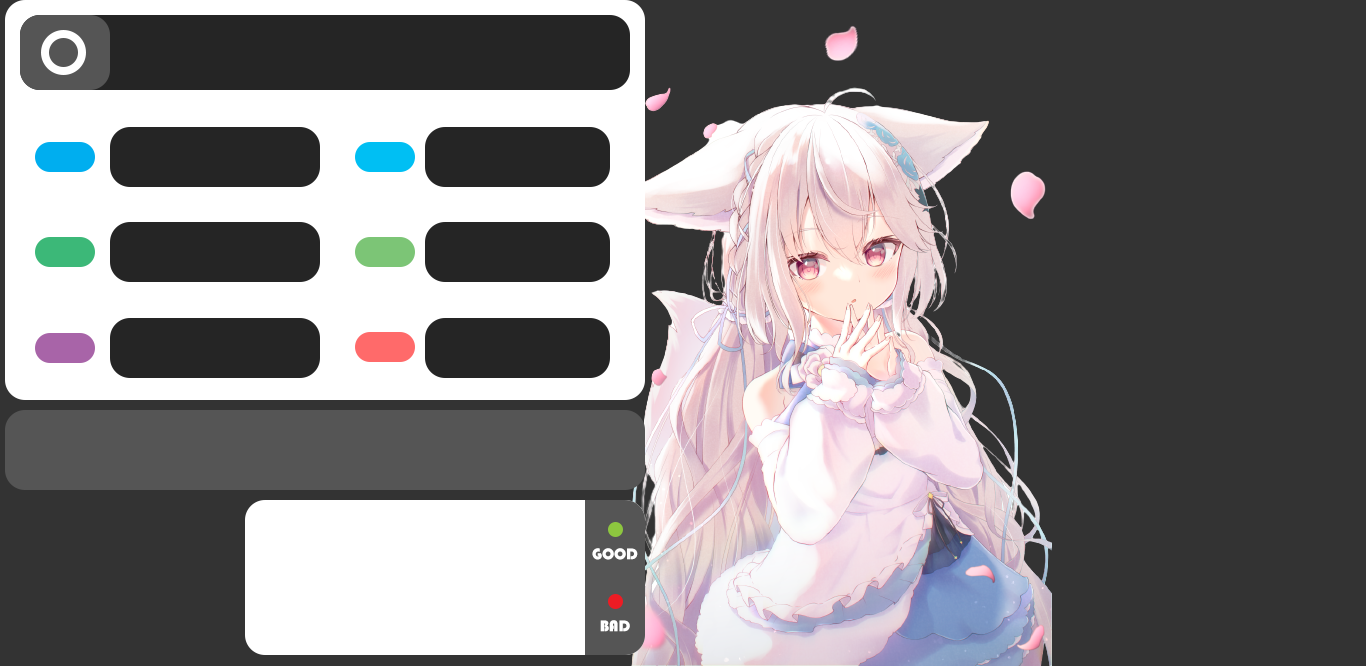
<style>
.page{position:relative;width:1366px;height:666px;background:#333333}
.page>*{position:absolute;margin:0}
.t1{font:16px "Bauhaus93";color:#ffffff}
</style>
<div class="page">
<p class="t1" style="left:592px;top:548px;width:46px;height:12px">GOOD</p>
<p class="t1" style="left:600px;top:620px;width:30px;height:12px">BAD</p>
</div>
